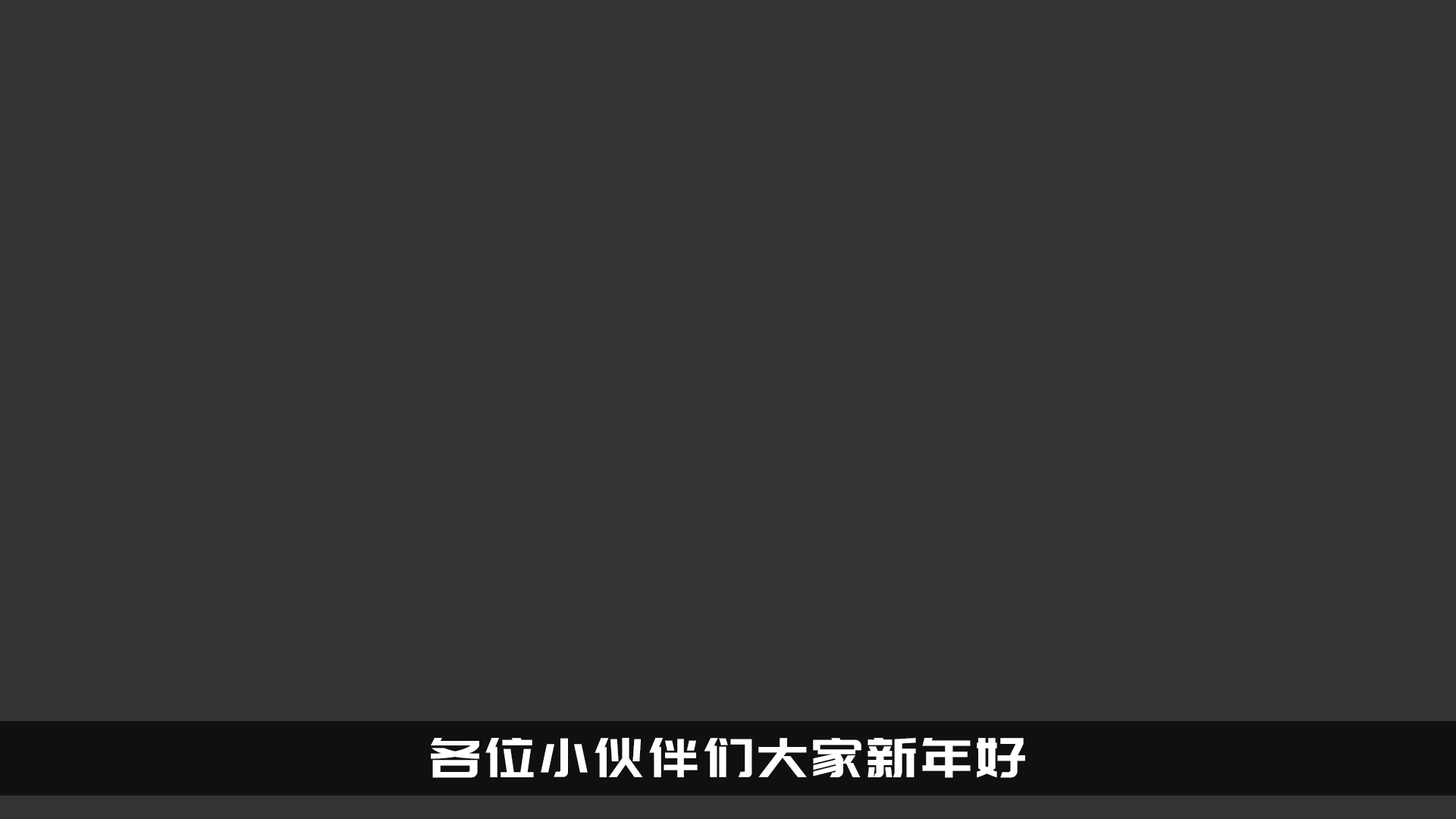
<style>
.page{position:relative;width:1456px;height:819px;background:#333333}
.page>*{position:absolute;margin:0}
.t1{font:54.6px "PangMenZhengDao-3";color:#ffffff}
</style>
<div class="page">
<p class="t1" style="left:431px;top:738px;width:594px;height:40px">各位小伙伴们大家新年好</p>
</div>
